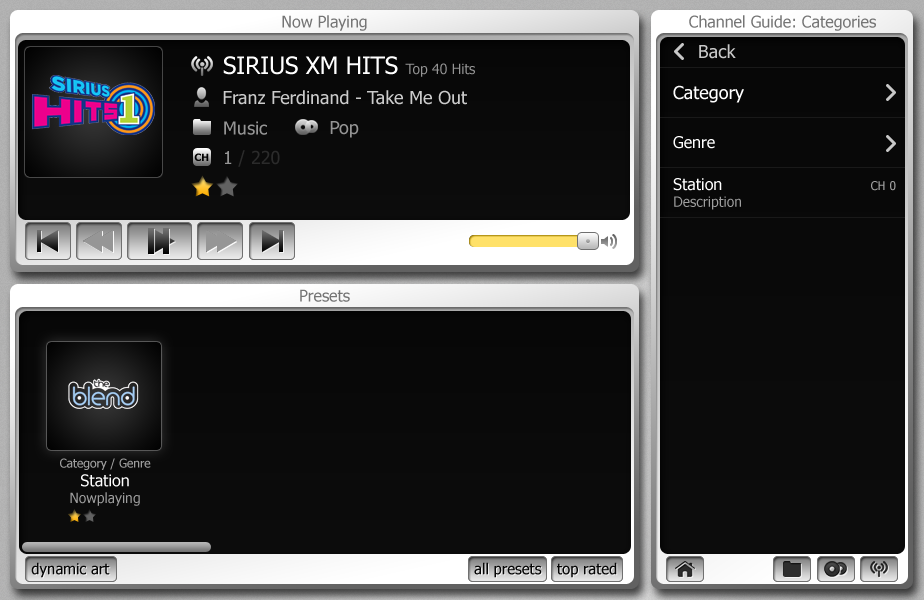
<style>
.page{position:relative;width:924px;height:600px}
.page>*{position:absolute;margin:0}
.t1{font:16px "Tahoma";color:#757575}
.t2{font:18px "Tahoma";color:#c8c8c8}
.t3{font:24px "Tahoma";color:#ffffff}
.t4{font:14px "Tahoma";color:#949494}
.t5{font:18px "Tahoma";color:#ffffff}
.t6{font:18px "Tahoma";color:#cbcbcb}
.t7{font:18px "Tahoma";color:#949494}
.t8{font:16px "Tahoma";color:#ffffff}
.t9{font:18px "Tahoma";color:#2b2b2b}
.t10{font:12px "Tahoma";color:#9e9e9e}
.t11{font:14px "Tahoma";color:#9e9e9e}
.t12{font:15px "Tahoma";color:#060606}
</style>
<div class="page">
<p class="t1" style="left:282px;top:15px;width:85px;height:16px">Now Playing</p>
<p class="t1" style="left:689px;top:15px;width:187px;height:16px">Channel Guide: Categories</p>
<p class="t2" style="left:699px;top:44px;width:37px;height:15px">Back</p>
<p class="t3" style="left:223px;top:56px;width:252px;height:21px">SIRIUS XM HITS <span class="t4">Top 40 Hits</span></p>
<p class="t5" style="left:673px;top:85px;width:71px;height:18px">Category</p>
<p class="t6" style="left:223px;top:90px;width:244px;height:15px">Franz Ferdinand - Take Me Out</p>
<p class="t7" style="left:224px;top:121px;width:43px;height:14px">Music</p>
<p class="t7" style="left:330px;top:121px;width:29px;height:17px">Pop</p>
<p class="t8" style="left:673px;top:136px;width:42px;height:13px">Genre</p>
<p class="t9" style="left:225px;top:150px;width:55px;height:17px"><span class="t7">1 </span>/ 220</p>
<p class="t8" style="left:673px;top:178px;width:49px;height:13px">Station</p>
<p class="t10" style="left:871px;top:181px;width:25px;height:10px">CH 0</p>
<p class="t11" style="left:674px;top:196px;width:67px;height:14px">Description</p>
<p class="t1" style="left:300px;top:289px;width:50px;height:13px">Presets</p>
<p class="t10" style="left:60px;top:458px;width:91px;height:12px">Category / Genre</p>
<p class="t8" style="left:81px;top:474px;width:48px;height:13px"><span class="t10"><br></span>Station</p>
<p class="t11" style="left:70px;top:492px;width:70px;height:14px">Nowplaying</p>
<p class="t12" style="left:31px;top:562px;width:79px;height:16px">dynamic art</p>
<p class="t12" style="left:474px;top:562px;width:68px;height:16px">all presets</p>
<p class="t12" style="left:557px;top:562px;width:60px;height:16px">top rated</p>
</div>
